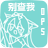
<style>
.page{position:relative;width:48px;height:48px;background:#7cd7d2}
.page>*{position:absolute;margin:0}
.t1{font:9px "AlimamaShuHeiTi-Bold";color:#ffffff}
.t2{font:9px/10px "SAOWelcomeTT-Bold";color:#ffffff}
.t3{font:9px/9px "SAOWelcomeTT-Bold";color:#ffffff}
</style>
<div class="page">
<p class="t1" style="left:8px;top:2px;width:27px;height:10px">别查我</p>
<p class="t2" style="left:41px;top:8px;width:4px;height:27px">D<br>P<br><span class="t3">S</span></p>
</div>
